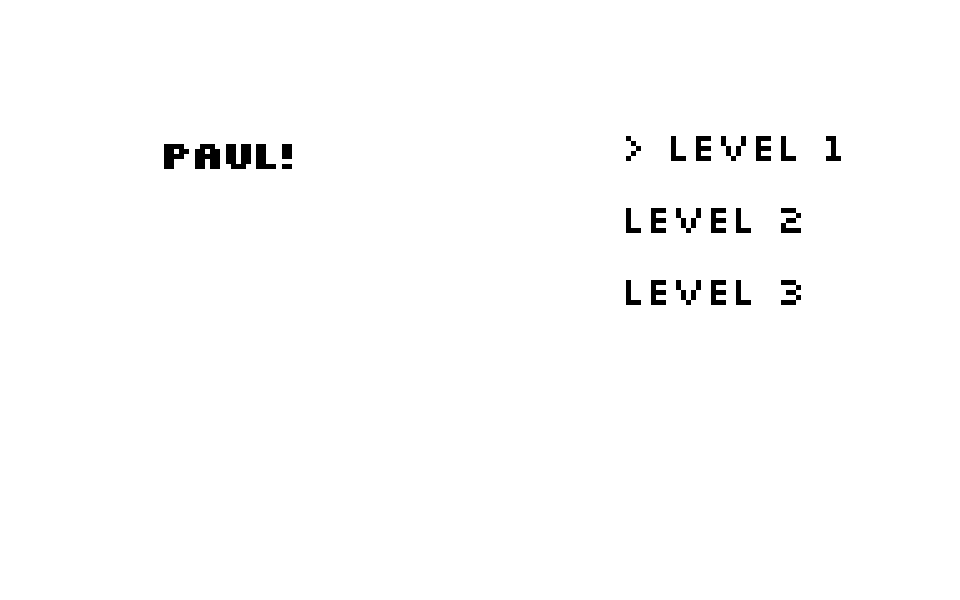
<style>
.page{position:relative;width:960px;height:600px;background:#ffffff}
.page>*{position:absolute;margin:0}
.t1{font:42px "Silkscreen";color:#000000}
.t2{font:42px "Silkscreen-Bold";letter-spacing:-0.1em;color:#000000}
</style>
<div class="page">
<p class="t1" style="left:626px;top:136px;width:215px;height:25px">&gt; Level 1</p>
<p class="t2" style="left:164px;top:144px;width:128px;height:25px">Paul!</p>
<p class="t1" style="left:626px;top:208px;width:175px;height:25px">Level 2</p>
<p class="t1" style="left:626px;top:280px;width:175px;height:25px">Level 3</p>
</div>
